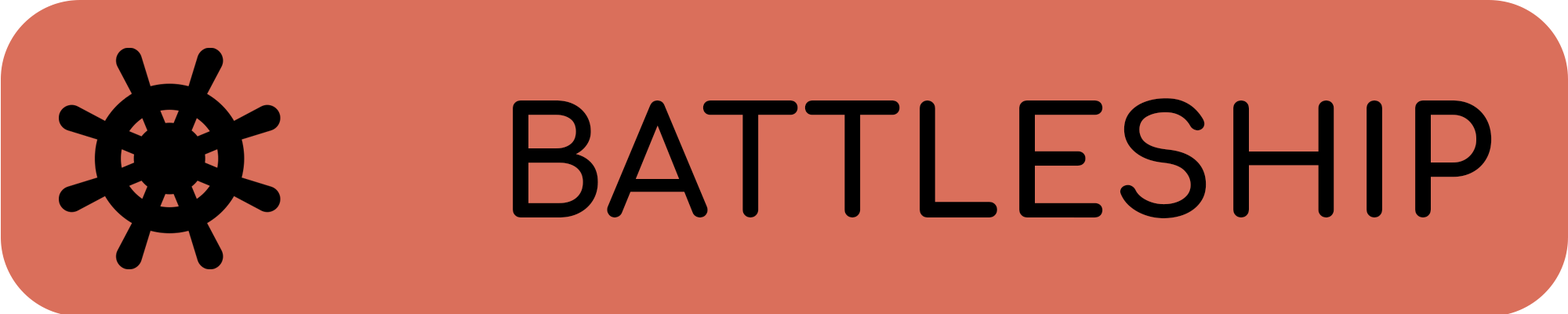
<style>
.page{position:relative;width:1568px;height:314px;background:#da6f5b}
.page>*{position:absolute;margin:0}
.t1{font:149.7px "Comfortaa-Bold";letter-spacing:0.02em;color:#000000}
</style>
<div class="page">
<p class="t1" style="left:513px;top:98px;width:979px;height:120px">BATTLESHIP</p>
</div>
